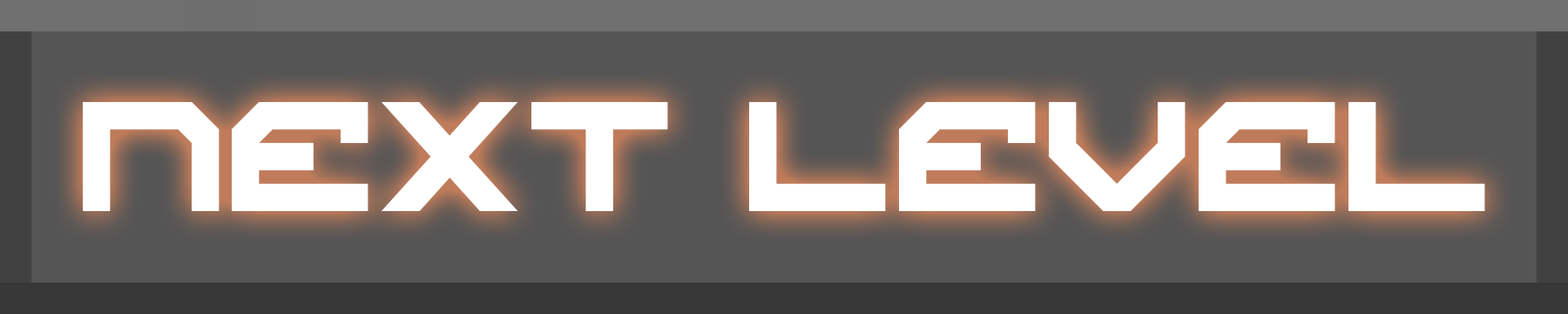
<style>
.page{position:relative;width:1568px;height:314px;background:#555555}
.page>*{position:absolute;margin:0}
.t1{font:108.9px "ScifiAdventure";color:#ffffff}
</style>
<div class="page">
<p class="t1" style="left:83px;top:102px;width:1402px;height:109px">N£XT L£V£L</p>
</div>
